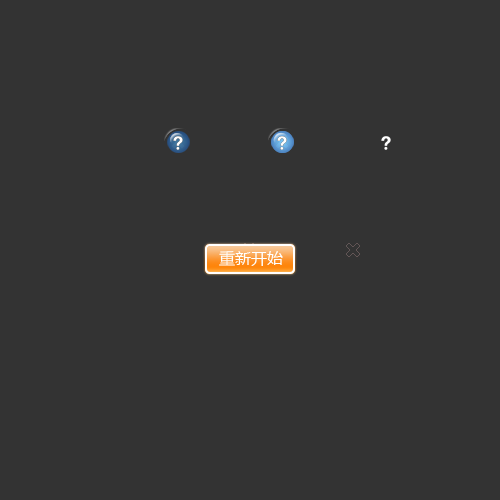
<style>
.page{position:relative;width:500px;height:500px;background:#333333}
.page>*{position:absolute;margin:0}
.t1{font:16px "MicrosoftYaHei";color:#ffffff}
</style>
<div class="page">
<p class="t1" style="left:219px;top:251px;width:64px;height:15px">重新开始</p>
</div>
